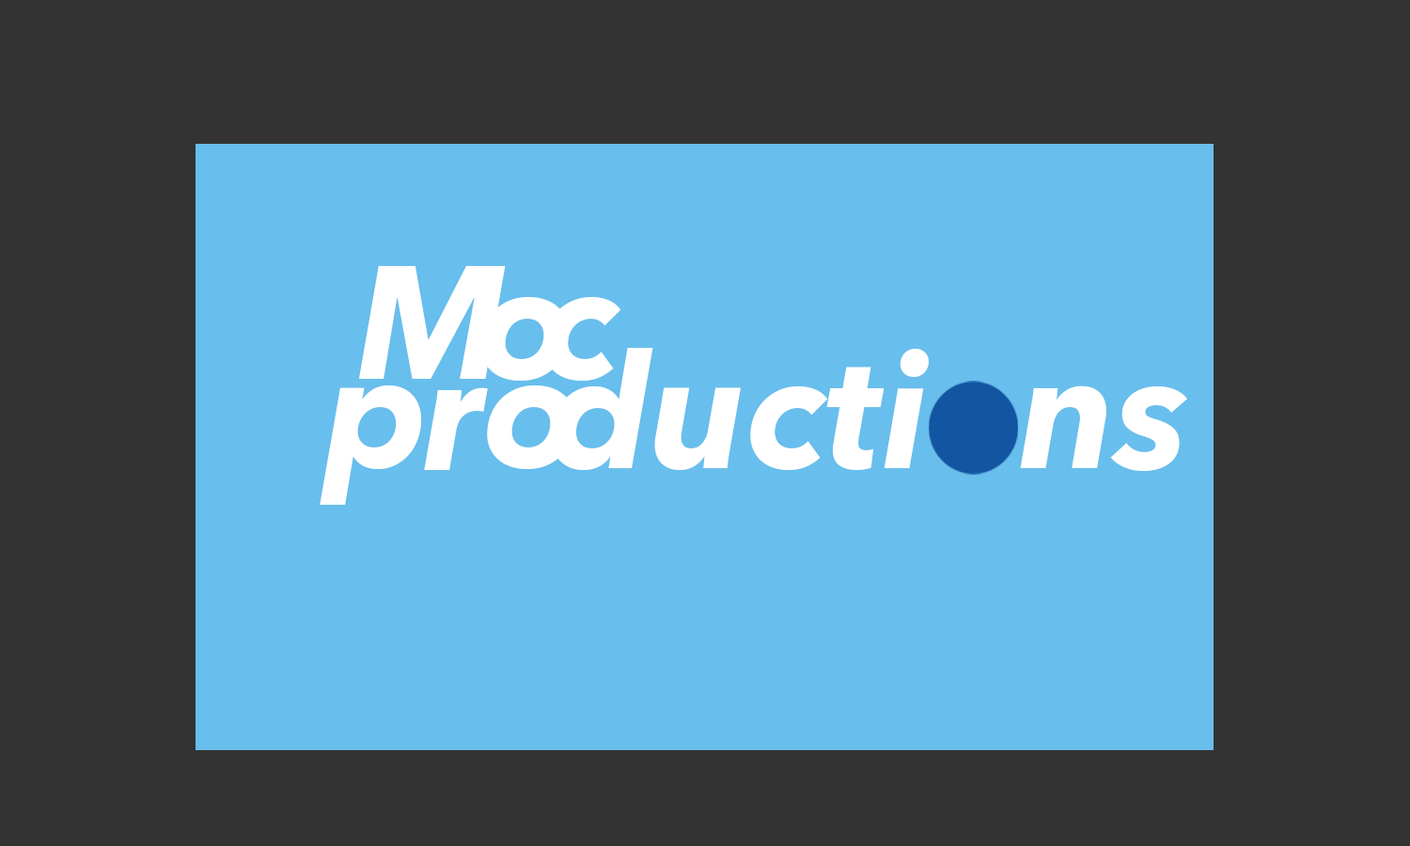
<style>
.page{position:relative;width:1410px;height:846px;background:#333333}
.page>*{position:absolute;margin:0}
.t1{font:160.1px "AvenirNext-BoldItalic";color:#ffffff}
</style>
<div class="page">
<p class="t1" style="left:359px;top:266px;width:147px;height:113px">M</p>
<p class="t1" style="left:480px;top:297px;width:89px;height:84px">o</p>
<p class="t1" style="left:543px;top:297px;width:78px;height:84px">c</p>
<p class="t1" style="left:551px;top:348px;width:378px;height:122px">ducti</p>
<p class="t1" style="left:320px;top:385px;width:102px;height:120px">p</p>
<p class="t1" style="left:424px;top:387px;width:64px;height:83px">r</p>
<p class="t1" style="left:487px;top:385px;width:88px;height:84px">o</p>
<p class="t1" style="left:1020px;top:385px;width:167px;height:86px">ns</p>
</div>
